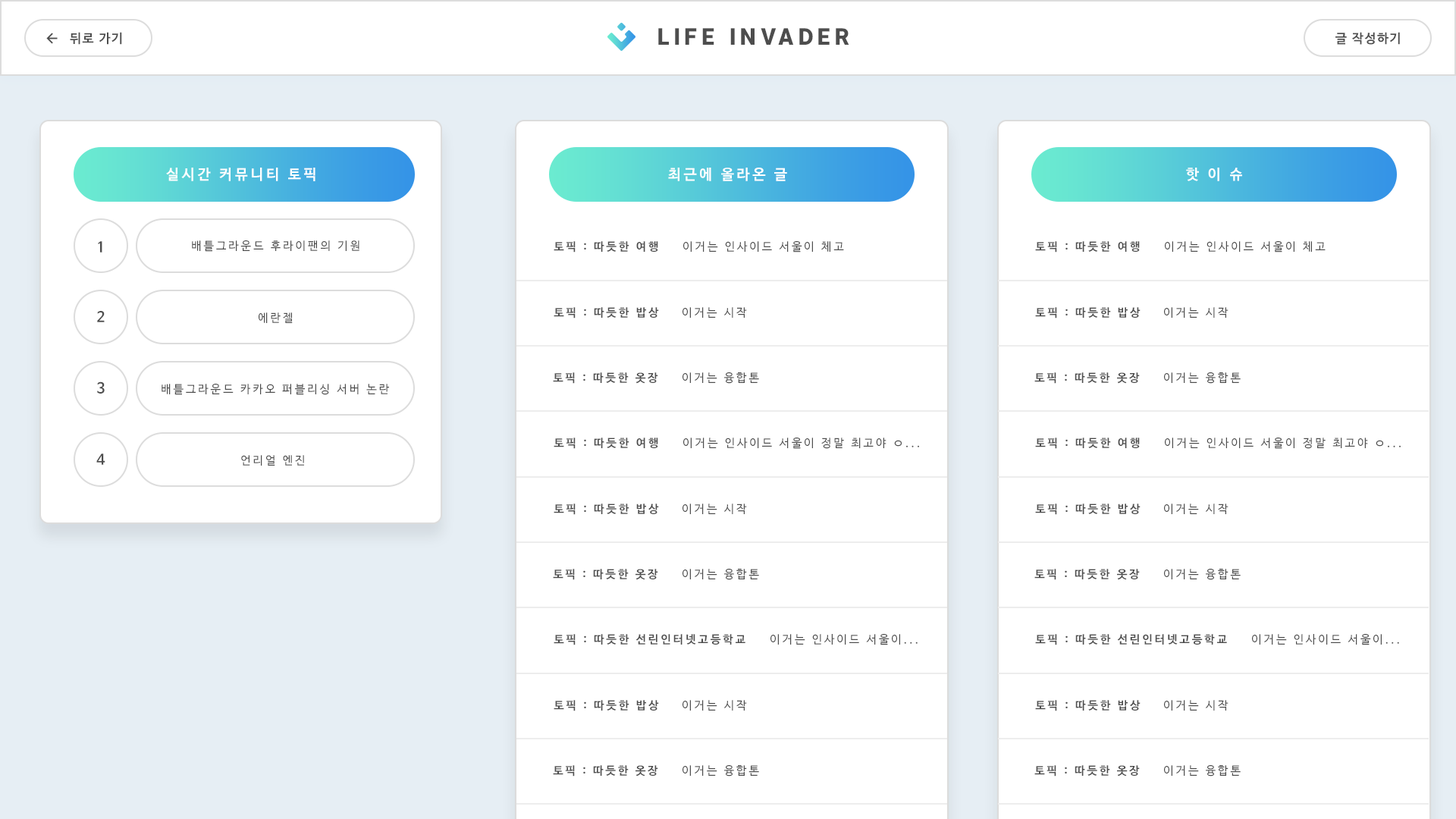
<style>
.page{position:relative;width:1456px;height:819px;background:#ffffff}
.page>*{position:absolute;margin:0}
.t1{font:22.5px "InterUI-Black";letter-spacing:0.2em;color:#4d4d4d}
.t2{font:12.6px "NanumBarunGothicBold";letter-spacing:0.1em;color:#4d4d4d}
.t3{font:14.4px "NanumBarunGothicBold";letter-spacing:0.2em;color:#ffffff}
.t4{font:14.4px "NanumBarunGothicBold";letter-spacing:0.2em;color:#4d4d4d}
.t5{font:11.4px "NanumBarunGothic";letter-spacing:0.2em;color:#4d4d4d}
.t6{font:11.4px "NanumBarunGothicBold";letter-spacing:0.2em;color:#4d4d4d}
</style>
<div class="page">
<p class="t1" style="left:658px;top:28px;width:191px;height:17px">LIFE INVADER</p>
<p class="t2" style="left:70px;top:32px;width:52px;height:13px">뒤로 가기</p>
<p class="t2" style="left:1335px;top:32px;width:65px;height:13px">글 작성하기</p>
<p class="t3" style="left:166px;top:168px;width:149px;height:13px">실시간 커뮤니티 토픽</p>
<p class="t3" style="left:668px;top:168px;width:119px;height:13px">최근에 올라온 글</p>
<p class="t3" style="left:1186px;top:168px;width:56px;height:13px">핫 이 슈</p>
<p class="t4" style="left:98px;top:241px;width:4px;height:12px">1</p>
<p class="t5" style="left:192px;top:240px;width:167px;height:12px">배틀그라운드 후라이팬의 기원</p>
<p class="t6" style="left:554px;top:241px;width:104px;height:12px">토픽 : 따듯한 여행</p>
<p class="t5" style="left:683px;top:241px;width:161px;height:12px">이거는 인사이드 서울이 체고</p>
<p class="t6" style="left:1035px;top:241px;width:105px;height:12px">토픽 : 따듯한 여행</p>
<p class="t5" style="left:1165px;top:241px;width:161px;height:12px">이거는 인사이드 서울이 체고</p>
<p class="t4" style="left:97px;top:311px;width:8px;height:11px">2</p>
<p class="t5" style="left:259px;top:312px;width:34px;height:11px">에란젤</p>
<p class="t6" style="left:554px;top:307px;width:105px;height:11px">토픽 : 따듯한 밥상</p>
<p class="t5" style="left:682px;top:307px;width:65px;height:11px">이거는 시작</p>
<p class="t6" style="left:1035px;top:307px;width:106px;height:11px">토픽 : 따듯한 밥상</p>
<p class="t5" style="left:1164px;top:307px;width:64px;height:11px">이거는 시작</p>
<p class="t6" style="left:553px;top:372px;width:105px;height:12px">토픽 : 따듯한 옷장</p>
<p class="t5" style="left:682px;top:372px;width:77px;height:12px">이거는 융합톤</p>
<p class="t6" style="left:1034px;top:372px;width:106px;height:12px">토픽 : 따듯한 옷장</p>
<p class="t5" style="left:1164px;top:372px;width:77px;height:12px">이거는 융합톤</p>
<p class="t4" style="left:97px;top:381px;width:8px;height:13px">3</p>
<p class="t5" style="left:162px;top:384px;width:227px;height:11px">배틀그라운드 카카오 퍼블리싱 서버 논란</p>
<p class="t6" style="left:554px;top:438px;width:104px;height:11px">토픽 : 따듯한 여행</p>
<p class="t5" style="left:683px;top:438px;width:236px;height:11px">이거는 인사이드 서울이 정말 최고야 ㅇ...</p>
<p class="t6" style="left:1035px;top:438px;width:105px;height:11px">토픽 : 따듯한 여행</p>
<p class="t5" style="left:1165px;top:438px;width:236px;height:11px">이거는 인사이드 서울이 정말 최고야 ㅇ...</p>
<p class="t4" style="left:96px;top:453px;width:9px;height:12px">4</p>
<p class="t5" style="left:241px;top:455px;width:63px;height:11px">언리얼 엔진</p>
<p class="t6" style="left:554px;top:504px;width:105px;height:11px">토픽 : 따듯한 밥상</p>
<p class="t5" style="left:682px;top:504px;width:65px;height:10px">이거는 시작</p>
<p class="t6" style="left:1035px;top:504px;width:106px;height:11px">토픽 : 따듯한 밥상</p>
<p class="t5" style="left:1164px;top:504px;width:64px;height:10px">이거는 시작</p>
<p class="t6" style="left:553px;top:569px;width:105px;height:11px">토픽 : 따듯한 옷장</p>
<p class="t5" style="left:682px;top:569px;width:77px;height:11px">이거는 융합톤</p>
<p class="t6" style="left:1034px;top:569px;width:106px;height:11px">토픽 : 따듯한 옷장</p>
<p class="t5" style="left:1164px;top:569px;width:77px;height:11px">이거는 융합톤</p>
<p class="t6" style="left:554px;top:634px;width:191px;height:11px">토픽 : 따듯한 선린인터넷고등학교</p>
<p class="t5" style="left:770px;top:634px;width:148px;height:11px">이거는 인사이드 서울이...</p>
<p class="t6" style="left:1035px;top:634px;width:192px;height:11px">토픽 : 따듯한 선린인터넷고등학교</p>
<p class="t5" style="left:1252px;top:634px;width:147px;height:11px">이거는 인사이드 서울이...</p>
<p class="t6" style="left:554px;top:700px;width:105px;height:11px">토픽 : 따듯한 밥상</p>
<p class="t5" style="left:682px;top:700px;width:65px;height:11px">이거는 시작</p>
<p class="t6" style="left:1035px;top:700px;width:106px;height:11px">토픽 : 따듯한 밥상</p>
<p class="t5" style="left:1164px;top:700px;width:64px;height:11px">이거는 시작</p>
<p class="t6" style="left:553px;top:765px;width:105px;height:12px">토픽 : 따듯한 옷장</p>
<p class="t5" style="left:682px;top:765px;width:77px;height:12px">이거는 융합톤</p>
<p class="t6" style="left:1034px;top:765px;width:106px;height:12px">토픽 : 따듯한 옷장</p>
<p class="t5" style="left:1164px;top:765px;width:77px;height:12px">이거는 융합톤</p>
</div>
